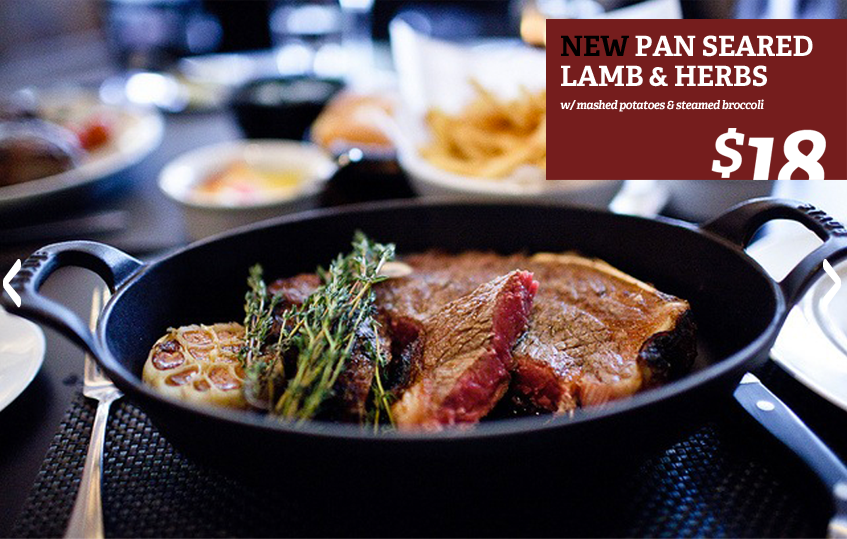
<style>
.page{position:relative;width:847px;height:539px}
.page>*{position:absolute;margin:0}
.t1{font:28px/30px "AdelleBasic-Bold";letter-spacing:-0.01em;color:#ffffff}
.t2{font:28px/30px "AdelleBasic-Bold";letter-spacing:-0.01em;color:#000000}
.t3{font:12px "AdelleBasic-BoldItalic";letter-spacing:-0.05em;color:#ffffff}
.t4{font:153.2px "BandaRegular";letter-spacing:-0.05em;color:#ffffff;scale:0.39 1}
</style>
<div class="page">
<p class="t1" style="left:561px;top:35px;width:252px;height:52px"><span class="t2">NEW </span>PAN SEARED <br>LAMB &amp; HERBS</p>
<p class="t3" style="left:560px;top:99px;width:204px;height:13px">w/ mashed potatoes &amp; steamed broccoli</p>
<p class="t4" style="left:3px;top:259px;width:18px;height:49px">&lt;</p>
<p class="t4" style="left:823px;top:259px;width:18px;height:49px;rotate:180deg">&lt;</p>
</div>
